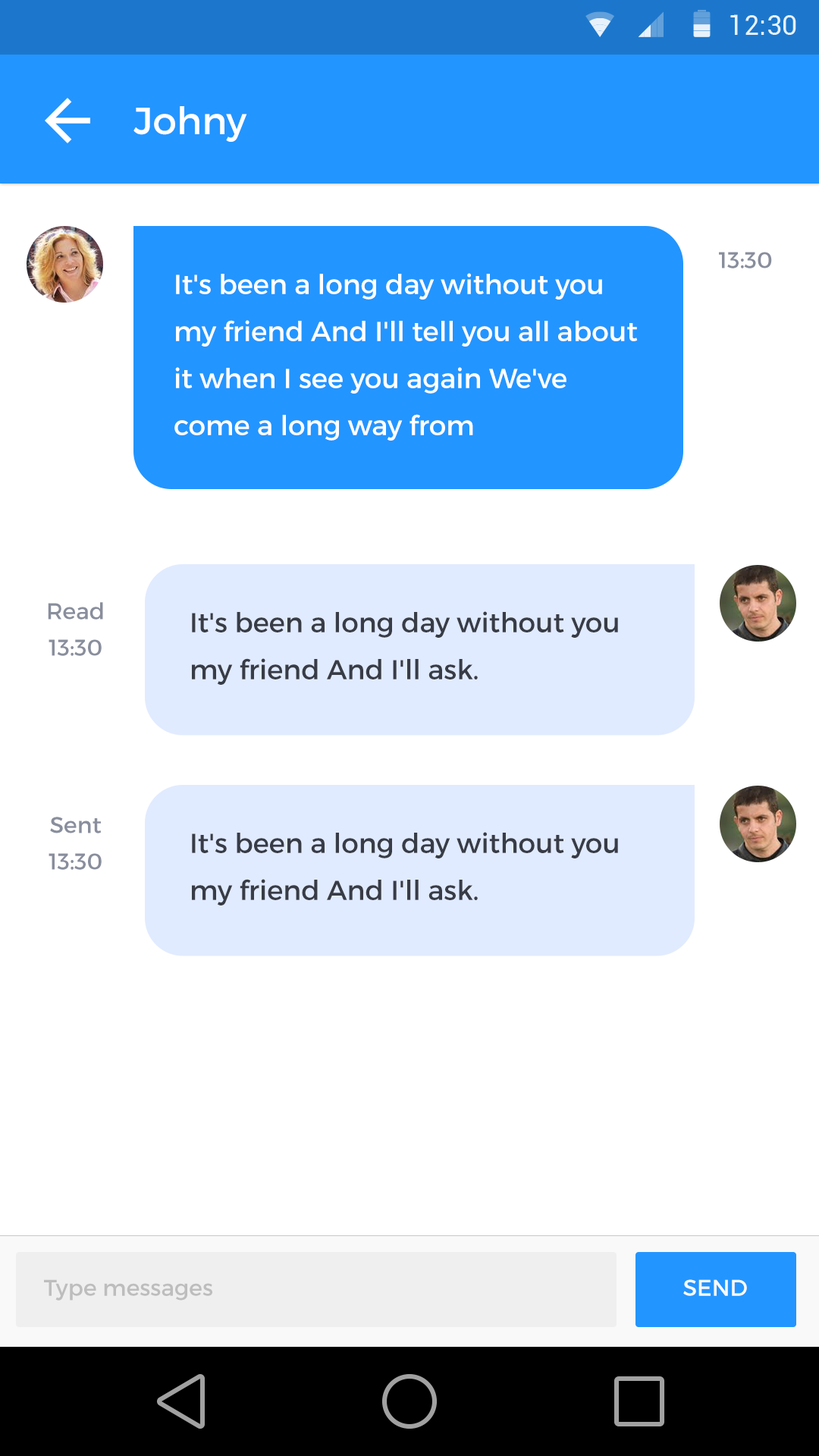
<style>
.page{position:relative;width:819px;height:1456px;background:#ffffff}
.page>*{position:absolute;margin:0}
.t1{font:37.9px "Montserrat-Regular";color:#ffffff}
.t2{font:22.7px "Montserrat-Regular";color:#898e9d}
.t3{font:27.3px/47px "Montserrat-Regular";color:#ffffff}
.t4{font:22.7px/36.4px "Montserrat-Regular";color:#898e9d}
.t5{font:27.3px/47px "Montserrat-Regular";color:#383c46}
.t6{font:22.7px "Montserrat-Regular";color:#bdbdbd}
.t7{font:22.7px "Montserrat-Regular";color:#f9f9f9}
</style>
<div class="page">
<p class="t1" style="left:133px;top:106px;width:114px;height:36px">Johny</p>
<p class="t2" style="left:719px;top:252px;width:53px;height:16px">13:30</p>
<p class="t3" style="left:174px;top:273px;width:464px;height:168px">It's been a long day without you my friend And I'll tell you all about it when I see you again We've come a long way from</p>
<p class="t4" style="left:48px;top:602px;width:55px;height:54px;text-align:center">Read<br>13:30</p>
<p class="t5" style="left:192px;top:611px;width:426px;height:74px">It's been a long day without you my friend And I'll ask.</p>
<p class="t4" style="left:49px;top:817px;width:53px;height:53px;text-align:center">Sent<br>13:30</p>
<p class="t5" style="left:192px;top:832px;width:426px;height:73px">It's been a long day without you my friend And I'll ask.</p>
<p class="t6" style="left:44px;top:1279px;width:168px;height:22px">Type messages</p>
<p class="t7" style="left:683px;top:1279px;width:64px;height:17px">SEND</p>
</div>
